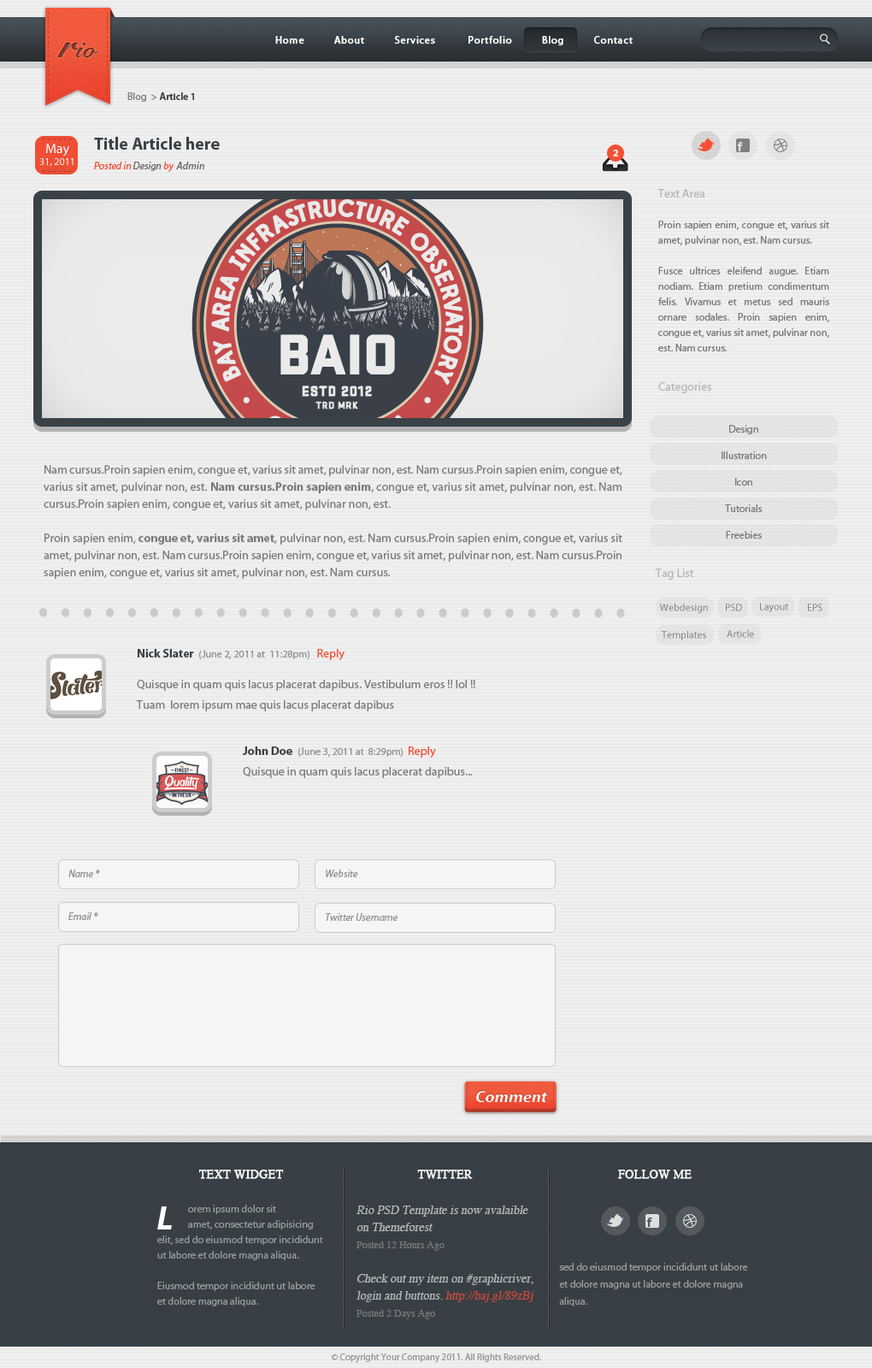
<style>
.page{position:relative;width:872px;height:1368px}
.page>*{position:absolute;margin:0}
.t1{font:10.3px "MyriadPro-Regular";letter-spacing:0.05em;color:#ffffff;font-weight:bold}
.t2{font:25.6px "SnellRoundhand-Bold";color:#783c32}
.t3{font:41px "SnellRoundhand-Bold";color:#783c32}
.t4{font:10.3px "MyriadPro-Semibold";color:#3a4247}
.t5{font:10.3px "MyriadPro-Regular";color:#7b7b7b}
.t6{font:17.1px/19.7px "MyriadPro-Bold";color:#3a4247}
.t7{font:10.3px/19.7px "MyriadPro-It";color:#f44f35}
.t8{font:10.3px/19.7px "MyriadPro-It";color:#666666}
.t9{font:10.3px/12px "MyriadPro-Regular";color:#ffffff}
.t10{font:13.7px/12px "MyriadPro-Regular";color:#ffffff}
.t11{font:10.3px "MyriadPro-Bold";color:#ffffff}
.t12{font:10.3px/15.4px "MyriadPro-Regular";color:#7b7b7b}
.t13{font:12px/30.8px "MyriadPro-Regular";color:#b6b6b6}
.t14{font:10.3px/26.5px "MyriadPro-Regular";color:#7b7b7b}
.t15{font:12px/17.1px "MyriadPro-Regular";color:#7b7b7b}
.t16{font:12px/17.1px "MyriadPro-Bold";color:#7b7b7b}
.t17{font:12px "MyriadPro-Regular";color:#b6b6b6}
.t18{font:10.3px "MyriadPro-Regular";color:#808080}
.t19{font:51.3px "MyriadPro-BoldCond";letter-spacing:0.2em;color:#cbcccd}
.t20{font:12px/20.5px "MyriadPro-Regular";color:#7b7b7b}
.t21{font:12px/10.3px "MyriadPro-Bold";color:#3a4247}
.t22{font:10.3px/10.3px "MyriadPro-Regular";color:#929292}
.t23{font:12px/10.3px "MyriadPro-Regular";color:#f44f35}
.t24{font:10.3px "MyriadPro-It";color:#929292}
.t25{font:17.1px "MyriadPro-BoldIt";color:#ffffff}
.t26{font:17.1px "MyriadPro-BoldCondIt";color:#ffffff}
.t27{font:10.3px/15.4px "MyriadPro-Regular";color:#999999}
.t28{font:12px/18.8px "Times-Roman";color:#ffffff;text-transform:uppercase;font-weight:bold}
.t29{font:12px/17.1px "Times-Roman";color:#b6b6b6;font-style:italic}
.t30{font:10.3px/17.1px "Times-Roman";color:#7a7a7a}
.t31{font:12px/17.1px "Times-Roman";color:#c9493b;font-style:italic}
.t32{font:10.3px/17.1px "MyriadPro-Regular";color:#999999}
.t33{font:34.2px "MyriadPro-BoldIt";color:#ffffff}
.t34{font:9.4px "MyriadPro-Regular";color:#999999}
</style>
<div class="page">
<p class="t1" style="left:275px;top:36px;width:358px;height:10px">Home          About          Services           Portfolio          Blog          Contact</p>
<p class="t2" style="left:57px;top:43px;width:42px;height:14px"><span class="t3">r</span>io</p>
<p class="t4" style="left:127px;top:92px;width:67px;height:10px"><span class="t5">Blog  &gt; </span>Article 1</p>
<p class="t6" style="left:94px;top:137px;width:126px;height:35px;text-align:justify">Title Article here<br><span class="t7">Posted in </span><span class="t8">Design </span><span class="t7">by  </span><span class="t8">Admin</span></p>
<p class="t9" style="left:39px;top:144px;width:35px;height:23px;text-align:center"><span class="t10">May<br></span>31, 2011</p>
<p class="t11" style="left:613px;top:150px;width:6px;height:6px">2</p>
<p class="t12" style="left:657px;top:189px;width:172px;height:162px;text-align:justify"><span class="t13">Text Area<br><br></span>Proin sapien enim, congue et, varius sit amet, pulvinar non, est. Nam cursus.<br><br>Fusce ultrices eleifend augue. Etiam nodiam. Etiam pretium condimentum felis. Vivamus et metus sed mauris ornare sodales. Proin sapien enim, congue et, varius sit amet, pulvinar non, est. Nam cursus.</p>
<p class="t14" style="left:658px;top:382px;width:109px;height:157px;text-align:justify"><span class="t13">Categories<br><br></span>Design<br>Illustration<br>Icon<br>Tutorials<br>Freebies</p>
<p class="t15" style="left:44px;top:465px;width:578px;height:114px;text-align:justify">Nam cursus.Proin sapien enim, congue et, varius sit amet, pulvinar non, est. Nam cursus.Proin sapien enim, congue et, varius sit amet, pulvinar non, est. <span class="t16">Nam cursus.Proin sapien enim</span>, congue et, varius sit amet, pulvinar non, est. Nam cursus.Proin sapien enim, congue et, varius sit amet, pulvinar non, est. <br><br>Proin sapien enim, <span class="t16">congue et, varius sit amet</span>, pulvinar non, est. Nam cursus.Proin sapien enim, congue et, varius sit amet, pulvinar non, est. Nam cursus.Proin sapien enim, congue et, varius sit amet, pulvinar non, est. Nam cursus.Proin sapien enim, congue et, varius sit amet, pulvinar non, est. Nam cursus.</p>
<p class="t17" style="left:655px;top:568px;width:39px;height:12px">Tag List</p>
<p class="t18" style="left:659px;top:603px;width:49px;height:10px">Webdesign</p>
<p class="t18" style="left:726px;top:603px;width:16px;height:8px">PSD</p>
<p class="t18" style="left:760px;top:603px;width:28px;height:9px">Layout</p>
<p class="t18" style="left:808px;top:603px;width:14px;height:8px">EPS</p>
<p class="t19" style="left:39px;top:608px;width:586px;height:10px">...........................</p>
<p class="t18" style="left:662px;top:630px;width:44px;height:10px">Templates</p>
<p class="t18" style="left:727px;top:629px;width:27px;height:9px">Article</p>
<p class="t20" style="left:136px;top:649px;width:339px;height:62px"><span class="t21">Nick Slater  </span><span class="t22">(June 2, 2011 at  11:28pm)   </span><span class="t23">Reply<br><br></span>Quisque in quam quis lacus placerat dapibus. Vestibulum eros !! lol !!<br>Tuam  lorem ipsum mae quis lacus placerat dapibus</p>
<p class="t20" style="left:243px;top:746px;width:229px;height:32px"><span class="t21">John Doe  </span><span class="t22">(June 3, 2011 at  8:29pm)  </span><span class="t23">Reply<br></span>Quisque in quam quis lacus placerat dapibus...</p>
<p class="t24" style="left:68px;top:869px;width:32px;height:8px">Name *</p>
<p class="t24" style="left:326px;top:869px;width:32px;height:8px">Website</p>
<p class="t24" style="left:68px;top:912px;width:30px;height:8px">Email *</p>
<p class="t24" style="left:325px;top:913px;width:72px;height:8px">Twitter Username</p>
<p class="t25" style="left:476px;top:1090px;width:72px;height:12px"><span class="t26"><br></span>Comment</p>
<p class="t27" style="left:157px;top:1169px;width:166px;height:137px;text-align:center"><span class="t28">Text Widget<br><br></span> orem ipsum dolor sit     amet, consectetur adipisicing elit, sed do eiusmod tempor incididunt ut labore et dolore magna aliqua. <br><br>Eiusmod tempor incididunt ut labore et dolore magna aliqua.</p>
<p class="t29" style="left:356px;top:1169px;width:178px;height:150px;text-align:center"><span class="t28">Twitter<br><br></span>Rio PSD Template is now avalaible on Themeforest<br><span class="t30">Posted 12 Hours Ago<br><br></span>Check out my item on #graphicriver, <br>login and buttons. <span class="t31">http://baj.gl/89zBj<br></span><span class="t30">Posted 2 Days Ago</span></p>
<p class="t32" style="left:559px;top:1169px;width:189px;height:137px;text-align:center"><span class="t28">Follow me<br><br><br><br><br></span>sed do eiusmod tempor incididunt ut labore et dolore magna ut labore et dolore magna aliqua.</p>
<p class="t33" style="left:157px;top:1206px;width:15px;height:23px">L</p>
<p class="t34" style="left:332px;top:1353px;width:209px;height:10px">© Copyright Your Company 2011. All Rights Reserved.</p>
</div>
